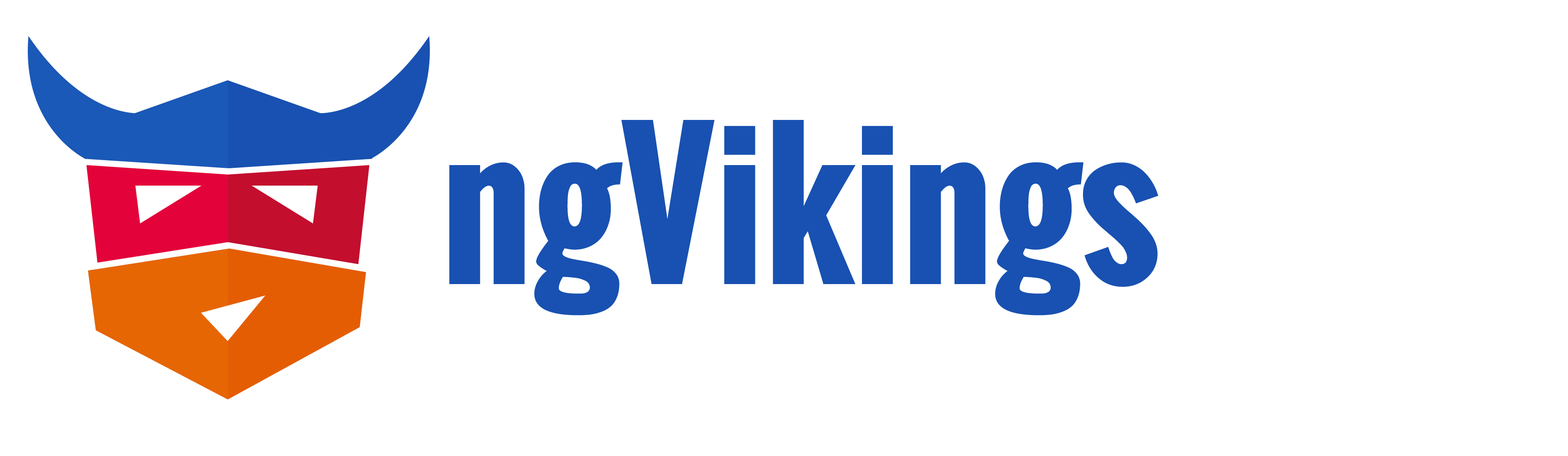
<style>
.page{position:relative;width:1568px;height:456px;background:#ffffff}
.page>*{position:absolute;margin:0}
.t1{font:186.7px "Oswald-Bold";color:#1851b1}
</style>
<div class="page">
<p class="t1" style="left:449px;top:120px;width:709px;height:195px">ngVikings</p>
</div>
